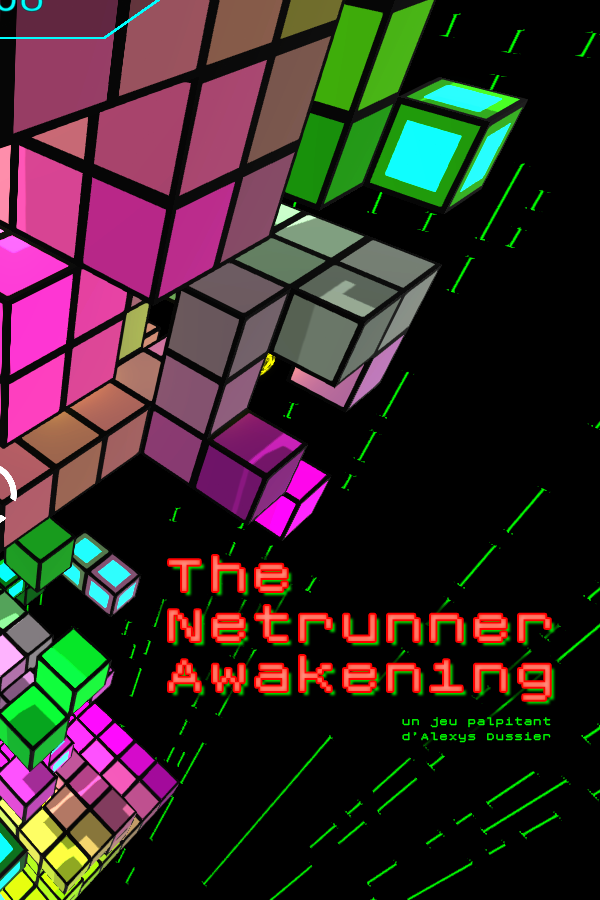
<style>
.page{position:relative;width:600px;height:900px;background:#000000}
.page>*{position:absolute;margin:0}
.t1{font:70px/50px "Roentgen-NBP";color:#ff7260}
.t2{font:15px/15px "Roentgen-NBP";color:#00ff00}
</style>
<div class="page">
<p class="t1" style="left:169px;top:556px;width:381px;height:144px">The<br>Netrunner<br>Awaken1ng</p>
<p class="t2" style="left:402px;top:717px;width:149px;height:26px;text-align:right">un jeu palpitant<br>d’Alexys Dussier</p>
</div>
